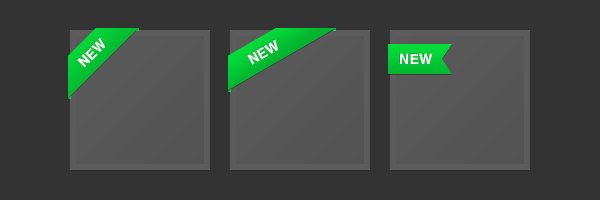
<style>
.page{position:relative;width:600px;height:200px;background:#333333}
.page>*{position:absolute;margin:0}
.t1{font:14px "Helvetica-Bold";letter-spacing:0.02em;color:#ffffff}
</style>
<div class="page">
<p class="t1" style="left:77px;top:37px;width:28px;height:31px;rotate:-45deg">NEW</p>
<p class="t1" style="left:247px;top:39px;width:31px;height:26px;rotate:-30deg">NEW</p>
<p class="t1" style="left:400px;top:53px;width:33px;height:11px">NEW</p>
</div>
